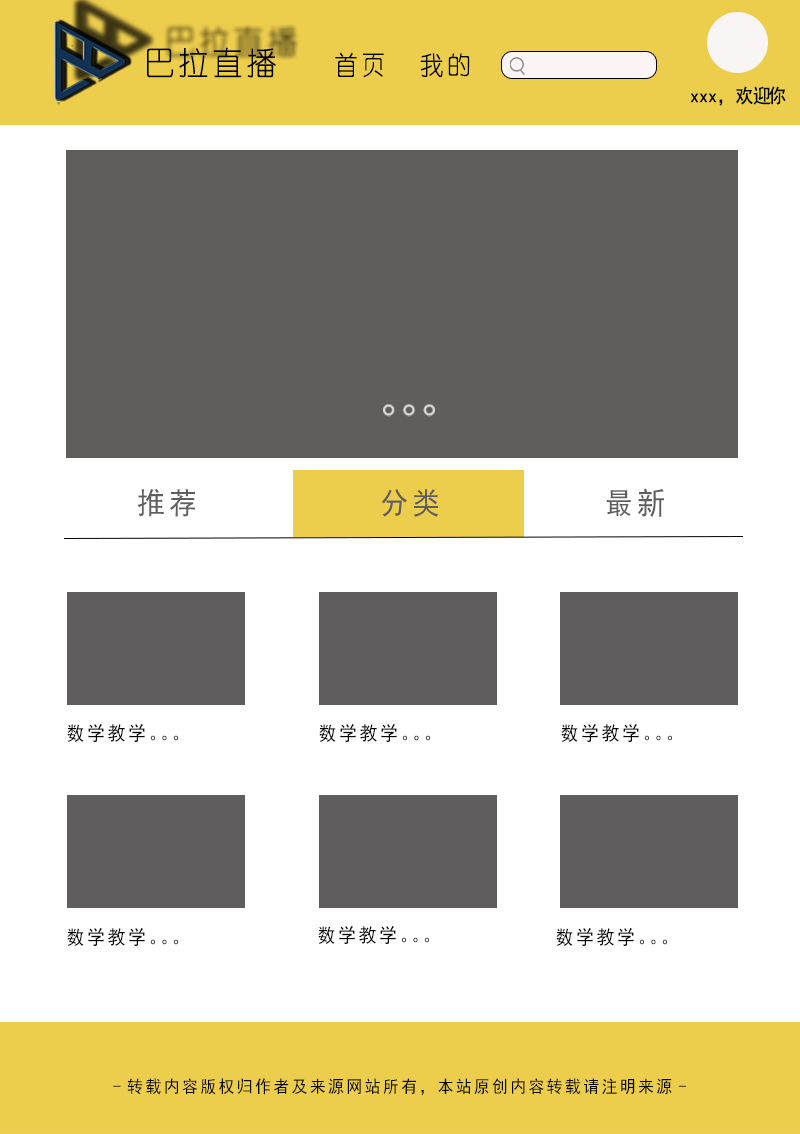
<style>
.page{position:relative;width:800px;height:1134px;background:#ffffff}
.page>*{position:absolute;margin:0}
.t1{font:32.4px "YouYuan";letter-spacing:0.14em;color:#000000;scale:0.93 1}
.t2{font:25.9px "YouYuan";letter-spacing:0.14em;color:#000000;scale:0.93 1}
.t3{font:19.4px "SimHei";color:#000000;scale:0.93 1}
.t4{font:30.2px "SimHei";letter-spacing:0.14em;color:#5f5d5d;scale:0.93 1}
.t5{font:19.4px "SimHei";letter-spacing:0.14em;color:#070707;scale:0.93 1}
.t6{font:17.3px "SimHei";letter-spacing:0.14em;color:#070707;scale:0.93 1}
</style>
<div class="page">
<p class="t1" style="left:147px;top:47px;width:129px;height:31px">巴拉直播</p>
<p class="t2" style="left:335px;top:52px;width:135px;height:26px">首页  我的</p>
<p class="t3" style="left:690px;top:86px;width:96px;height:20px">xxx，欢迎你</p>
<p class="t4" style="left:137px;top:488px;width:527px;height:29px">推荐          分类         最新</p>
<p class="t5" style="left:67px;top:724px;width:111px;height:18px">数学教学。。。</p>
<p class="t5" style="left:319px;top:724px;width:111px;height:18px">数学教学。。。</p>
<p class="t5" style="left:561px;top:724px;width:111px;height:18px">数学教学。。。</p>
<p class="t5" style="left:67px;top:928px;width:111px;height:18px">数学教学。。。</p>
<p class="t5" style="left:318px;top:926px;width:111px;height:18px">数学教学。。。</p>
<p class="t5" style="left:556px;top:928px;width:111px;height:18px">数学教学。。。</p>
<p class="t6" style="left:113px;top:1078px;width:573px;height:18px">-转载内容版权归作者及来源网站所有，本站原创内容转载请注明来源-</p>
</div>
